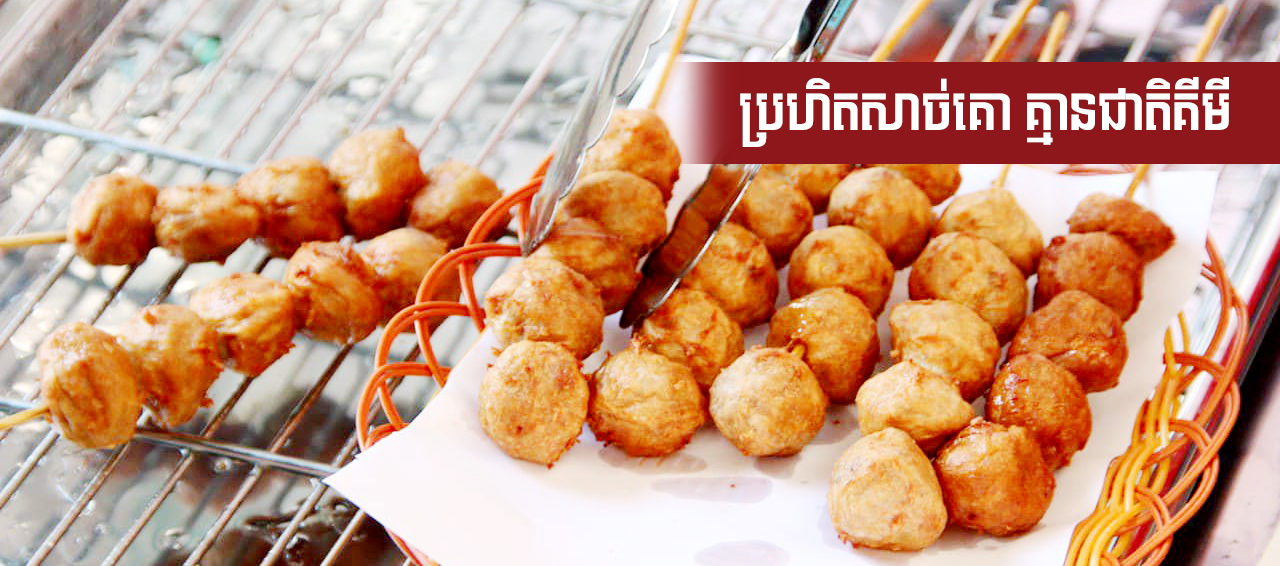
<style>
.page{position:relative;width:1280px;height:566px}
.page>*{position:absolute;margin:0}
.t1{font:50px "Kh-Jrung-Thom";color:#ffffff;scale:0.96 1}
</style>
<div class="page">
<p class="t1" style="left:740px;top:77px;width:489px;height:70px">ប្រហិតសាច់គោ គ្មានជាតិគីមី</p>
</div>
